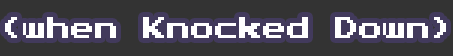
<style>
.page{position:relative;width:453px;height:56px;background:#333333}
.page>*{position:absolute;margin:0}
.t1{font:24px "PressStart2P";color:#ffffff}
</style>
<div class="page">
<p class="t1" style="left:5px;top:17px;width:441px;height:21px">(when Knocked Down)</p>
</div>
